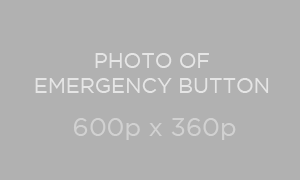
<style>
.page{position:relative;width:300px;height:180px;background:#b1b1b1}
.page>*{position:absolute;margin:0}
.t1{font:20.8px "GothamBook";color:#e5e5e5}
.t2{font:25px "GothamBook";color:#d1d1d1}
</style>
<div class="page">
<p class="t1" style="left:35px;top:53px;width:234px;height:40px;text-align:center">PHOTO OF <br>EMERGENCY BUTTON</p>
<p class="t2" style="left:73px;top:118px;width:163px;height:22px">600p x 360p</p>
</div>
